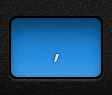
<style>
.page{position:relative;width:112px;height:95px}
.page>*{position:absolute;margin:0}
.t1{font:32px "MyriadPro-Regular";color:#ffffff}
</style>
<div class="page">
<p class="t1" style="left:54px;top:54px;width:5px;height:8px">,</p>
</div>
